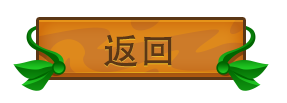
<style>
.page{position:relative;width:287px;height:103px;background:#ffffff}
.page>*{position:absolute;margin:0}
.t1{font:36px "AdobeHeitiStd-Regular";letter-spacing:0.025em;color:#5b3716}
</style>
<div class="page">
<p class="t1" style="left:104px;top:34px;width:68px;height:33px">返回</p>
</div>
